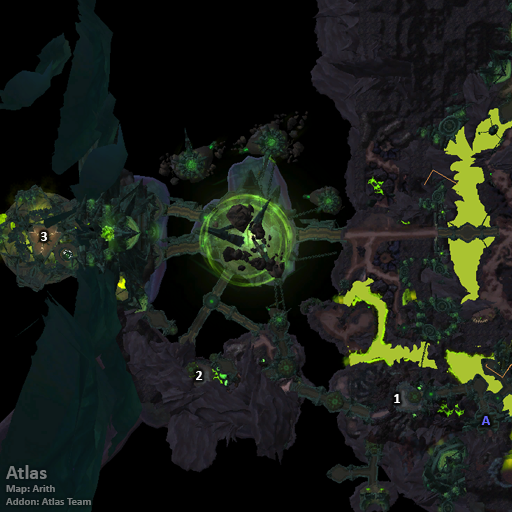
<style>
.page{position:relative;width:512px;height:512px;background:#000000}
.page>*{position:absolute;margin:0}
.t1{font:14px "Calibri-Bold";color:#ffffff}
.t2{font:14px "Calibri-Bold";color:#6666ff}
.t3{font:11px "Calibri-Bold";color:#777b7c}
.t4{font:20px "Calibri-Bold";color:#777b7c}
</style>
<div class="page">
<p class="t1" style="left:41px;top:232px;width:6px;height:9px">3</p>
<p class="t1" style="left:196px;top:371px;width:7px;height:9px">2</p>
<p class="t1" style="left:394px;top:394px;width:6px;height:9px">1</p>
<p class="t2" style="left:481px;top:416px;width:9px;height:9px">A</p>
<p class="t3" style="left:6px;top:465px;width:85px;height:40px"><span class="t4">Atlas<br></span>Map: Arith<br>Addon: Atlas Team</p>
</div>
